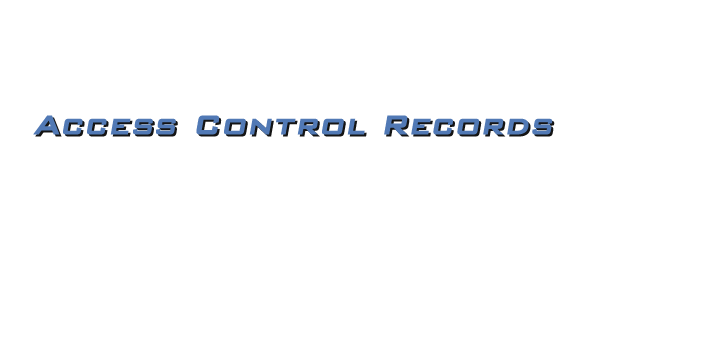
<style>
.page{position:relative;width:709px;height:340px;background:#ffffff}
.page>*{position:absolute;margin:0}
.t1{font:35px "BankGothicBT-Medium";color:#5179b5;font-weight:bold;font-style:italic}
</style>
<div class="page">
<p class="t1" style="left:33px;top:115px;width:520px;height:20px">Access Control Records</p>
</div>
